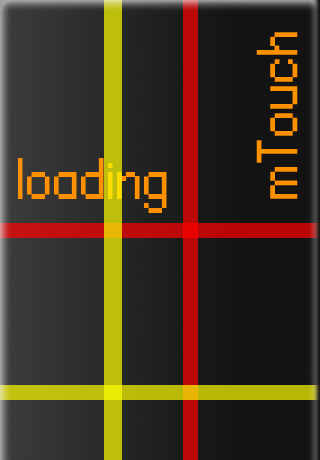
<style>
.page{position:relative;width:320px;height:460px}
.page>*{position:absolute;margin:0}
.t1{font:36px "Aurora";color:#ff9000}
</style>
<div class="page">
<p class="t1" style="left:256px;top:32px;width:42px;height:167px;rotate:-90deg">mTouch</p>
<p class="t1" style="left:18px;top:158px;width:149px;height:55px">loading</p>
</div>
